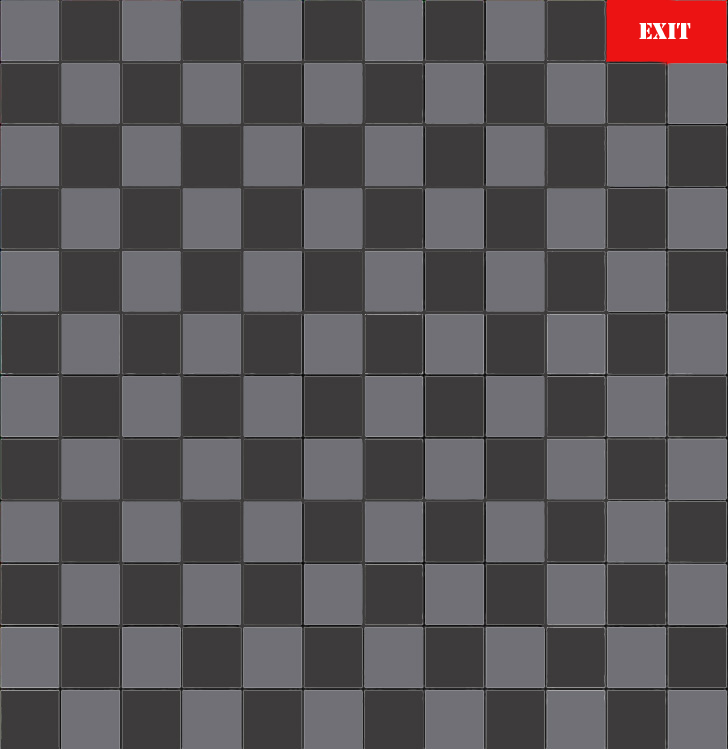
<style>
.page{position:relative;width:728px;height:749px;background:#3d3b3c}
.page>*{position:absolute;margin:0}
.t1{font:23.9px "Stencil";color:#ffffff}
</style>
<div class="page">
<p class="t1" style="left:639px;top:23px;width:52px;height:16px">exit</p>
</div>
